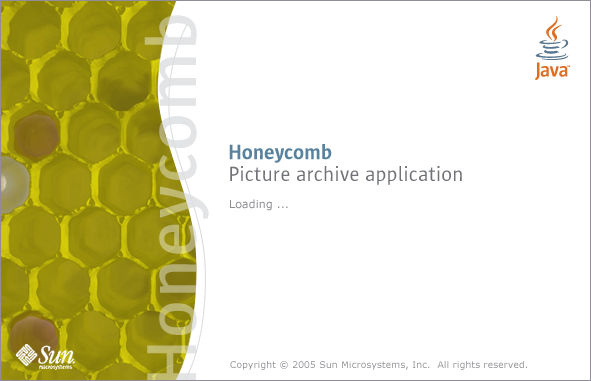
<style>
.page{position:relative;width:591px;height:381px;background:#ffffff}
.page>*{position:absolute;margin:0}
.t1{font:21px/22.8px "SunSans";letter-spacing:0.01em;color:#707277}
.t2{font:21px/22.8px "SunSansDemi";letter-spacing:0.01em;color:#58839f}
.t3{font:11px "Verdana";letter-spacing:0.01em;color:#8d8e92}
.t4{font:9px "Verdana";letter-spacing:0.028em;color:#8d8e92}
</style>
<div class="page">
<p class="t1" style="left:229px;top:144px;width:233px;height:41px"><span class="t2">Honeycomb<br></span>Picture archive application</p>
<p class="t3" style="left:230px;top:199px;width:58px;height:12px">Loading ...</p>
<p class="t4" style="left:230px;top:361px;width:297px;height:9px">Copyright © 2005 Sun Microsystems, Inc.  All rights reserved.</p>
</div>
